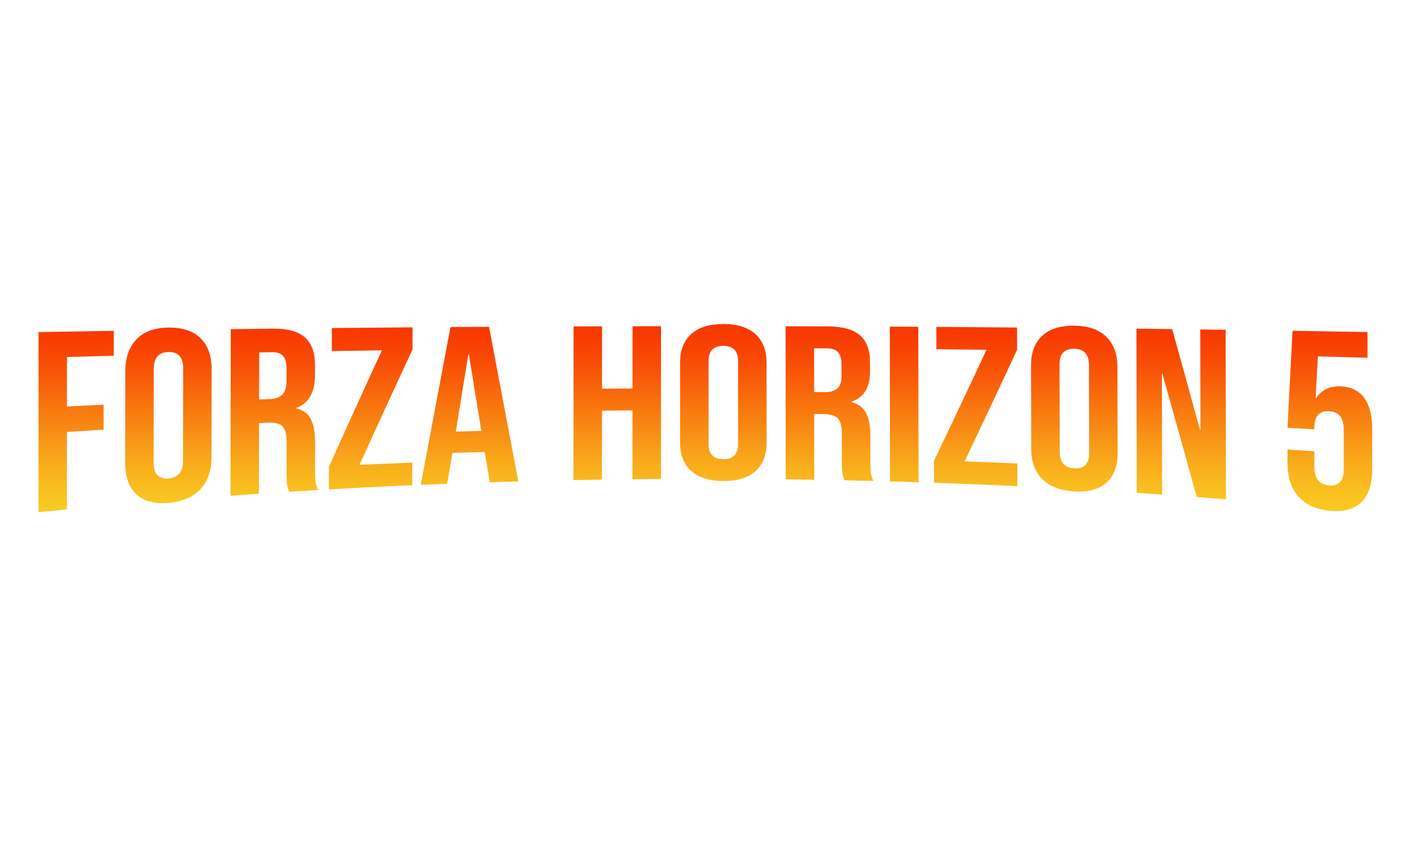
<style>
.page{position:relative;width:1410px;height:846px;background:#ffffff}
.page>*{position:absolute;margin:0}
.t1{font:258.5px "BebasNeue-Regular"}
</style>
<div class="page">
<p class="t1" style="left:38px;top:324px;width:1334px;height:189px">FORZA HORIZON 5</p>
</div>
